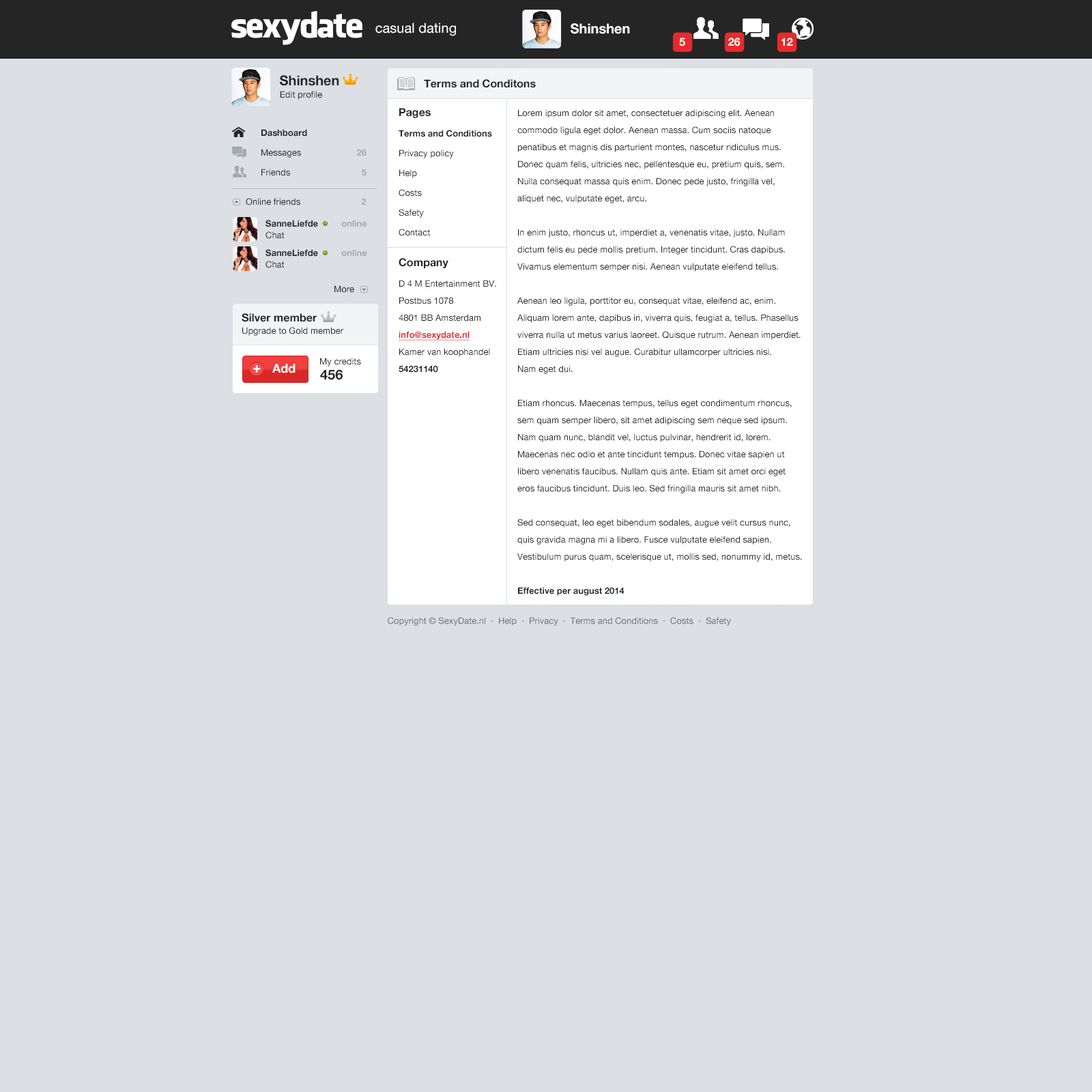
<style>
.page{position:relative;width:1092px;height:1092px;background:#dcdfe3}
.page>*{position:absolute;margin:0}
.t1{font:34.1px "FacebookLetterFaces";letter-spacing:-0.05em;color:#ffffff}
.t2{font:13.6px "HelveticaNeue";color:#ffffff}
.t3{font:13.6px "HelveticaNeue-Bold";color:#ffffff}
.t4{font:10.9px "HelveticaNeue-Bold";color:#ffffff}
.t5{font:13.6px "HelveticaNeue-Bold";color:#252525}
.t6{font:10.9px "HelveticaNeue-Bold";color:#252525}
.t7{font:8.9px "HelveticaNeue";color:#252525}
.t8{font:8.9px/19.7px "HelveticaNeue";color:#252525}
.t9{font:10.9px/17.1px "HelveticaNeue-Bold";color:#252525}
.t10{font:8.9px/20.5px "HelveticaNeue-Bold";color:#252525}
.t11{font:8.9px/20.5px "HelveticaNeue";color:#252525}
.t12{font:8.9px/17.1px "HelveticaNeue";color:#252525}
.t13{font:8.9px/17.1px "HelveticaNeue-Bold";color:#ea292a;text-decoration:underline}
.t14{font:8.9px/17.1px "HelveticaNeue-Bold";color:#252525}
.t15{font:8.9px/19.7px "HelveticaNeue-Bold";color:#252525}
.t16{font:8.9px/19.7px "HelveticaNeue-Bold";color:#a5aab2}
.t17{font:8.9px "HelveticaNeue-Bold";color:#a5aab2}
.t18{font:8.9px/11.6px "HelveticaNeue-Bold";color:#252525}
.t19{font:8.9px/11.6px "HelveticaNeue-Bold";color:#a5aab2}
.t20{font:8.9px/11.6px "HelveticaNeue";color:#252525}
.t21{font:13px "HelveticaNeue-Bold";color:#ffffff;font-weight:bold}
.t22{font:12.3px "HelveticaNeue-Bold";color:#ffffff}
.t23{font:8.9px "HelveticaNeue";color:#707070}
</style>
<div class="page">
<p class="t1" style="left:231px;top:11px;width:131px;height:34px">sexydate</p>
<p class="t2" style="left:375px;top:23px;width:81px;height:13px">casual dating</p>
<p class="t3" style="left:571px;top:23px;width:59px;height:11px">Shinshen</p>
<p class="t4" style="left:679px;top:38px;width:6px;height:8px">5</p>
<p class="t4" style="left:728px;top:38px;width:13px;height:8px">26</p>
<p class="t4" style="left:781px;top:38px;width:12px;height:8px">12</p>
<p class="t5" style="left:280px;top:75px;width:59px;height:11px">Shinshen</p>
<p class="t6" style="left:424px;top:79px;width:112px;height:9px">Terms and Conditons</p>
<p class="t7" style="left:280px;top:91px;width:42px;height:9px">Edit profile</p>
<p class="t8" style="left:399px;top:108px;width:97px;height:265px"><span class="t9">Pages<br></span><span class="t10">Terms and Conditions<br></span>Privacy policy<br>Help<br>Costs<br>Safety<br>Contact<br><br><span class="t9">Company<br></span><span class="t11">D 4 M Entertainment BV.<br></span><span class="t12">Postbus 1078<br>4801 BB Amsterdam<br></span><span class="t13">info@sexydate.nl<br></span><span class="t12">Kamer van koophandel<br></span><span class="t14">54231140</span></p>
<p class="t12" style="left:517px;top:109px;width:285px;height:487px">Lorem ipsum dolor sit amet, consectetuer adipiscing elit. Aenean <br>commodo ligula eget dolor. Aenean massa. Cum sociis natoque <br>penatibus et magnis dis parturient montes, nascetur ridiculus mus. <br>Donec quam felis, ultricies nec, pellentesque eu, pretium quis, sem. <br>Nulla consequat massa quis enim. Donec pede justo, fringilla vel, <br>aliquet nec, vulputate eget, arcu. <br><br>In enim justo, rhoncus ut, imperdiet a, venenatis vitae, justo. Nullam <br>dictum felis eu pede mollis pretium. Integer tincidunt. Cras dapibus. <br>Vivamus elementum semper nisi. Aenean vulputate eleifend tellus. <br><br>Aenean leo ligula, porttitor eu, consequat vitae, eleifend ac, enim. <br>Aliquam lorem ante, dapibus in, viverra quis, feugiat a, tellus. Phasellus <br>viverra nulla ut metus varius laoreet. Quisque rutrum. Aenean imperdiet. <br>Etiam ultricies nisi vel augue. Curabitur ullamcorper ultricies nisi. <br>Nam eget dui.<br><br>Etiam rhoncus. Maecenas tempus, tellus eget condimentum rhoncus, <br>sem quam semper libero, sit amet adipiscing sem neque sed ipsum. <br>Nam quam nunc, blandit vel, luctus pulvinar, hendrerit id, lorem. <br>Maecenas nec odio et ante tincidunt tempus. Donec vitae sapien ut <br>libero venenatis faucibus. Nullam quis ante. Etiam sit amet orci eget <br>eros faucibus tincidunt. Duis leo. Sed fringilla mauris sit amet nibh.<br><br>Sed consequat, leo eget bibendum sodales, augue velit cursus nunc, <br>quis gravida magna mi a libero. Fusce vulputate eleifend sapien. <br>Vestibulum purus quam, scelerisque ut, mollis sed, nonummy id, metus.<br><br><span class="t14">Effective per august 2014</span></p>
<p class="t8" style="left:261px;top:129px;width:46px;height:47px"><span class="t15">Dashboard<br></span>Messages<br>Friends</p>
<p class="t16" style="left:357px;top:149px;width:9px;height:27px;text-align:right">26<br>5</p>
<p class="t7" style="left:246px;top:198px;width:120px;height:7px">Online friends      <span class="t17">2</span></p>
<p class="t18" style="left:265px;top:220px;width:102px;height:19px">SanneLiefde          <span class="t19">online<br></span><span class="t20">Chat</span></p>
<p class="t18" style="left:265px;top:249px;width:102px;height:19px">SanneLiefde          <span class="t19">online<br></span><span class="t20">Chat</span></p>
<p class="t7" style="left:334px;top:285px;width:20px;height:8px">More</p>
<p class="t6" style="left:242px;top:313px;width:75px;height:9px">Silver member</p>
<p class="t7" style="left:242px;top:327px;width:101px;height:9px">Upgrade to Gold member</p>
<p class="t21" style="left:253px;top:365px;width:8px;height:8px">+</p>
<p class="t22" style="left:272px;top:364px;width:24px;height:9px">Add</p>
<p class="t7" style="left:320px;top:358px;width:41px;height:8px">My credits</p>
<p class="t5" style="left:320px;top:369px;width:23px;height:11px">456</p>
<p class="t23" style="left:388px;top:617px;width:343px;height:9px">Copyright © SexyDate.nl  ·  Help  ·  Privacy  ·  Terms and Conditions  ·  Costs  ·  Safety</p>
</div>
